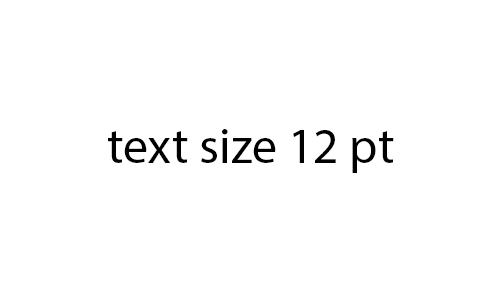
<style>
.page{position:relative;width:500px;height:300px;background:#ffffff}
.page>*{position:absolute;margin:0}
.t1{font:50px "MyriadPro-Regular";color:#000000}
</style>
<div class="page">
<p class="t1" style="left:108px;top:129px;width:286px;height:44px">text size 12 pt</p>
</div>
